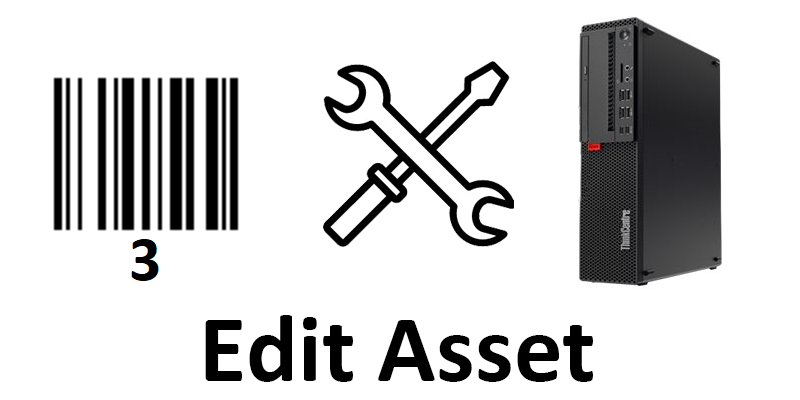
<style>
.page{position:relative;width:800px;height:400px;background:#ffffff}
.page>*{position:absolute;margin:0}
.t1{font:97.3px "Calibri-Bold";color:#000000}
</style>
<div class="page">
<p class="t1" style="left:205px;top:315px;width:388px;height:67px">Edit Asset</p>
</div>
